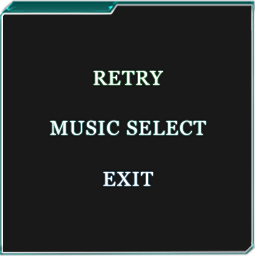
<style>
.page{position:relative;width:256px;height:256px;background:#191919}
.page>*{position:absolute;margin:0}
.t1{font:20px "Vani";letter-spacing:0.05em;color:#ffffff}
</style>
<div class="page">
<p class="t1" style="left:93px;top:71px;width:70px;height:14px">RETRY</p>
<p class="t1" style="left:50px;top:120px;width:156px;height:15px">MUSIC SELECT</p>
<p class="t1" style="left:103px;top:172px;width:50px;height:14px">EXIT</p>
</div>
